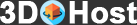
<style>
.page{position:relative;width:137px;height:25px;background:#333333}
.page>*{position:absolute;margin:0}
.t1{font:30px "Arial-BoldMT";color:#ffffff;font-weight:bold}
</style>
<div class="page">
<p class="t1" style="left:0px;top:1px;width:38px;height:23px">3D</p>
<p class="t1" style="left:69px;top:1px;width:68px;height:23px">Host</p>
</div>
